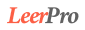
<style>
.page{position:relative;width:85px;height:30px;background:#ffffff}
.page>*{position:absolute;margin:0}
.t1{font:24px "MinionConceptItalic-BoldItalic";letter-spacing:-0.06em;color:#fc5f45}
.t2{font:24px "MinionConceptItalic-BoldItalic";letter-spacing:-0.06em;color:#616161}
</style>
<div class="page">
<p class="t1" style="left:7px;top:7px;width:72px;height:17px">Leer<span class="t2">Pro</span></p>
</div>
